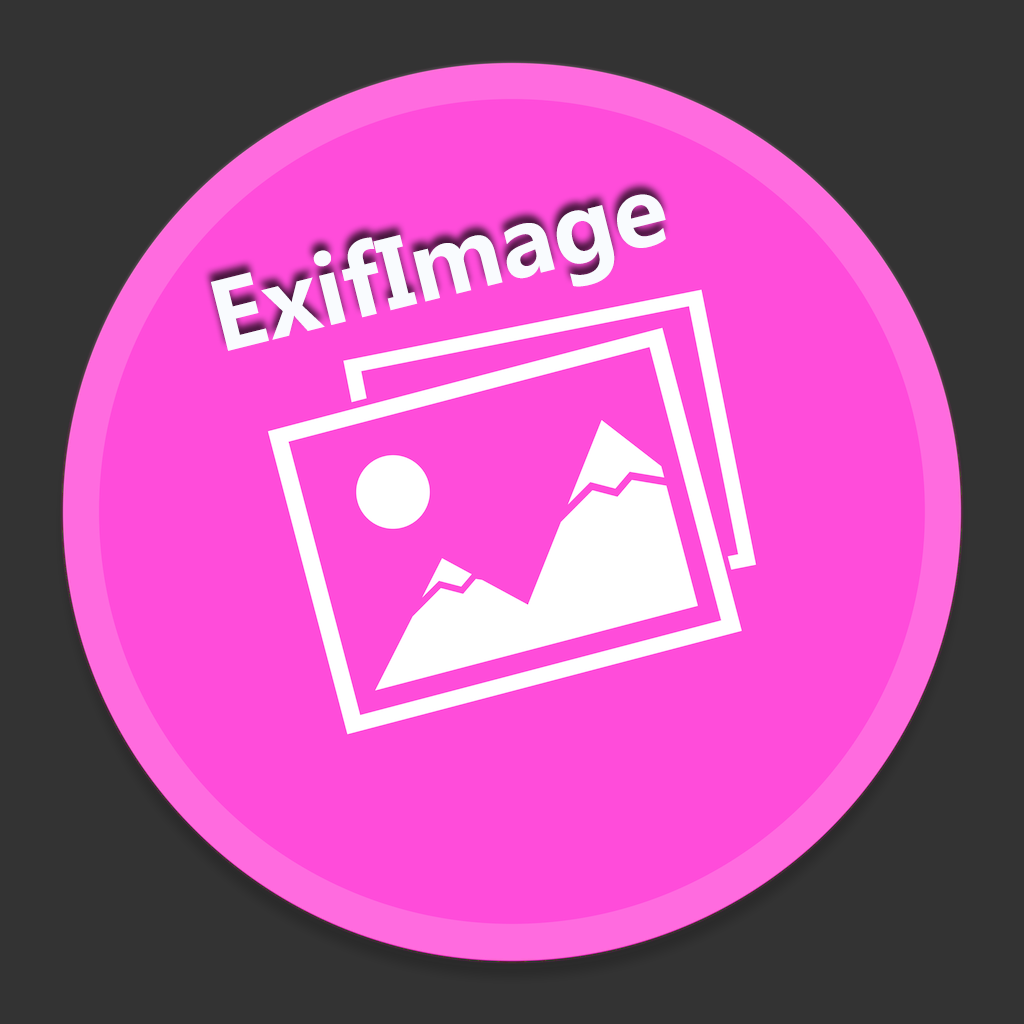
<style>
.page{position:relative;width:1024px;height:1024px;background:#ff4cda}
.page>*{position:absolute;margin:0}
.t1{font:93.4px "MicrosoftYaHei-Bold";color:#f9fbfe}
</style>
<div class="page">
<p class="t1" style="left:211px;top:194px;width:455px;height:157px;rotate:-14deg">ExifImage</p>
</div>
